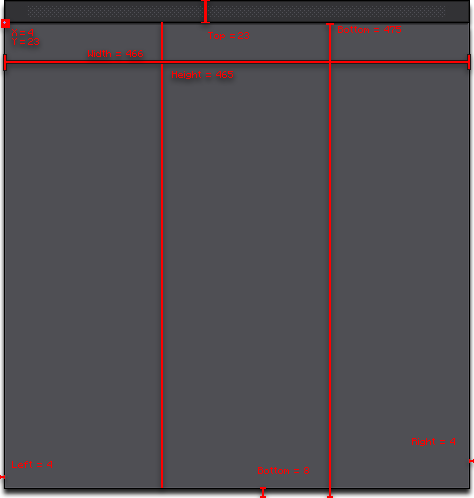
<style>
.page{position:relative;width:474px;height:498px;background:#4f4f54}
.page>*{position:absolute;margin:0}
.t1{font:8px "Minecraftia-Regular";color:#ff0000}
</style>
<div class="page">
<p class="t1" style="left:12px;top:29px;width:27px;height:16px">X = 4<br>Y = 23</p>
<p class="t1" style="left:338px;top:26px;width:63px;height:7px">Bottom  =  475</p>
<p class="t1" style="left:208px;top:32px;width:41px;height:8px">Top  = 23</p>
<p class="t1" style="left:88px;top:50px;width:55px;height:7px">Width  =  466</p>
<p class="t1" style="left:172px;top:71px;width:61px;height:8px">Height  =  465</p>
<p class="t1" style="left:412px;top:438px;width:43px;height:8px">Right  =  4</p>
<p class="t1" style="left:12px;top:461px;width:40px;height:7px">Left  =  4</p>
<p class="t1" style="left:258px;top:467px;width:51px;height:7px">Bottom  =  8</p>
</div>
